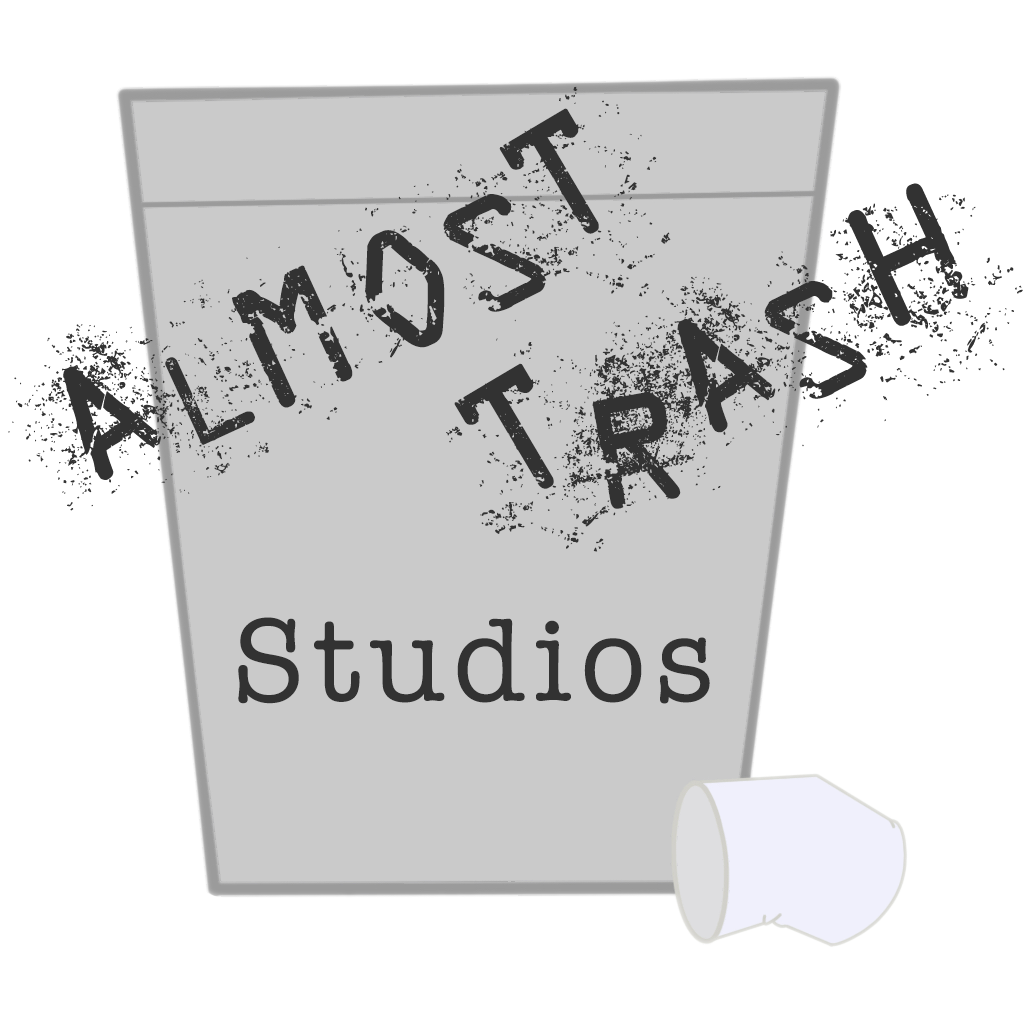
<style>
.page{position:relative;width:1024px;height:1024px;background:#ffffff}
.page>*{position:absolute;margin:0}
.t1{font:200px "StaubigesVergngen";color:#323232}
.t2{font:120px "AmericanTypewriter";letter-spacing:0.075em;color:#323232}
</style>
<div class="page">
<p class="t1" style="left:8px;top:86px;width:663px;height:425px;rotate:-25deg">ALMOST</p>
<p class="t1" style="left:446px;top:183px;width:577px;height:369px;rotate:-25deg">TRASH</p>
<p class="t2" style="left:238px;top:617px;width:472px;height:87px">Studios</p>
</div>
